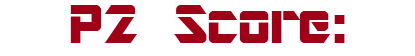
<style>
.page{position:relative;width:415px;height:56px;background:#ffffff}
.page>*{position:absolute;margin:0}
.t1{font:60px "ARDESTINE";color:#9f0017}
</style>
<div class="page">
<p class="t1" style="left:70px;top:5px;width:275px;height:38px">P2 Score:</p>
</div>
